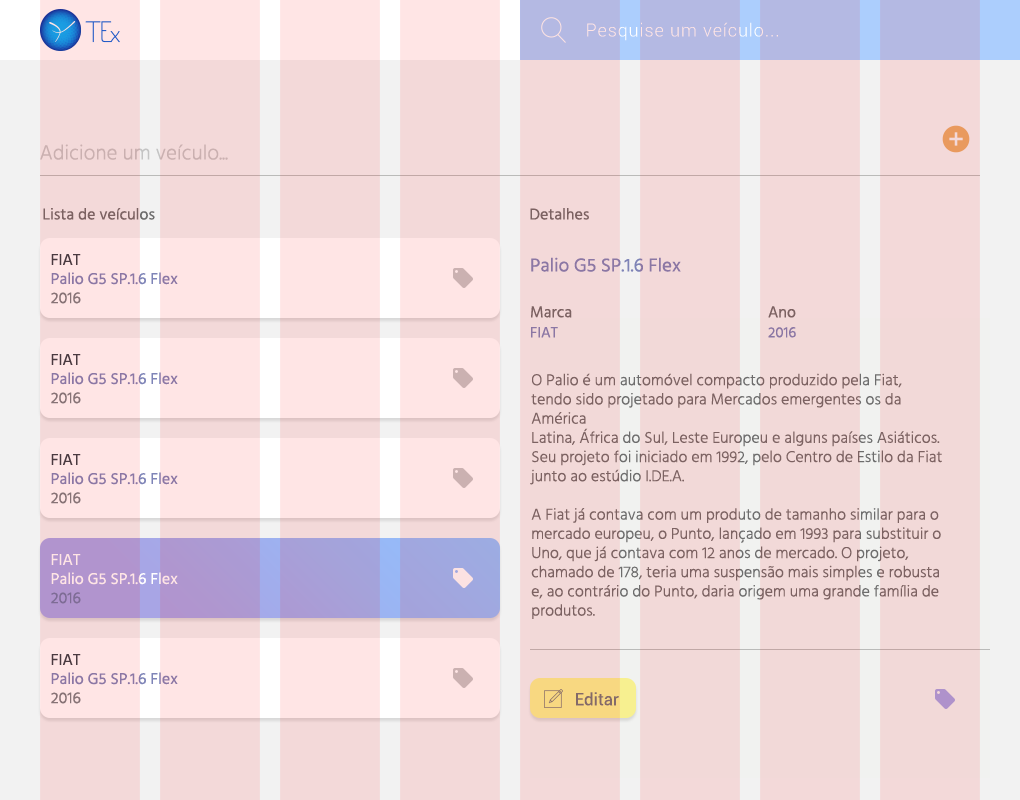
<style>
.page{position:relative;width:1020px;height:800px;background:#f3d9d9}
.page>*{position:absolute;margin:0}
.t1{font:18px "Roboto-Light";letter-spacing:0.05em}
.t2{font:21px "Hind-Light";color:#c4c4c4}
.t3{font:16px "Hind-Regular";color:#6d6d6d}
.t4{font:16px "Hind-Regular";color:#7e84b7}
.t5{font:16px "Hind-Regular";color:#364147}
.t6{font:16px "Hind-Regular";color:#798083}
.t7{font:19px "Hind-Regular";color:#7e84b7}
.t8{font:15px "Hind-Regular";color:#7e84b7}
.t9{font:16px "Hind-Light";color:#6d6d6d}
.t10{font:16px "Hind-Regular";color:#ffe5e5}
.t11{font:17px "Roboto-Regular";color:#757575}
</style>
<div class="page">
<p class="t1" style="left:587px;top:22px;width:191px;height:19px">Pesquise um veículo...</p>
<p class="t2" style="left:40px;top:144px;width:188px;height:16px">Adicione um veículo...</p>
<p class="t3" style="left:43px;top:208px;width:112px;height:12px">Lista de veículos</p>
<p class="t3" style="left:530px;top:208px;width:59px;height:12px">Detalhes</p>
<p class="t4" style="left:51px;top:254px;width:127px;height:50px"><span class="t5">FIAT<br></span>Palio G5 SP.1.6 Flex<br><span class="t6">2016</span></p>
<p class="t7" style="left:531px;top:257px;width:150px;height:15px">Palio G5 SP.1.6 Flex</p>
<p class="t3" style="left:531px;top:306px;width:41px;height:12px">Marca</p>
<p class="t3" style="left:768px;top:306px;width:28px;height:12px">Ano</p>
<p class="t8" style="left:531px;top:327px;width:27px;height:11px">FIAT</p>
<p class="t8" style="left:768px;top:327px;width:28px;height:11px">2016</p>
<p class="t4" style="left:51px;top:354px;width:127px;height:50px"><span class="t5">FIAT<br></span>Palio G5 SP.1.6 Flex<br><span class="t6">2016</span></p>
<p class="t9" style="left:530px;top:373px;width:412px;height:246px">O Palio é um automóvel compacto produzido pela Fiat,<br>tendo sido projetado para Mercados emergentes os da América<br>Latina, África do Sul, Leste Europeu e alguns países Asiáticos.<br>Seu projeto foi iniciado em 1992, pelo Centro de Estilo da Fiat<br>junto ao estúdio I.DE.A.<br><br>A Fiat já contava com um produto de tamanho similar para o mercado europeu, o Punto, lançado em 1993 para substituir o Uno, que já contava com 12 anos de mercado. O projeto, chamado de 178, teria uma suspensão mais simples e robusta e, ao contrário do Punto, daria origem uma grande família de produtos.</p>
<p class="t4" style="left:51px;top:454px;width:127px;height:50px"><span class="t5">FIAT<br></span>Palio G5 SP.1.6 Flex<br><span class="t6">2016</span></p>
<p class="t10" style="left:51px;top:554px;width:127px;height:50px">FIAT<br>Palio G5 SP.1.6 Flex<br>2016</p>
<p class="t4" style="left:51px;top:654px;width:127px;height:50px"><span class="t5">FIAT<br></span>Palio G5 SP.1.6 Flex<br><span class="t6">2016</span></p>
<p class="t11" style="left:576px;top:692px;width:43px;height:14px">Editar</p>
</div>
